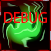
<style>
.page{position:relative;width:51px;height:51px}
.page>*{position:absolute;margin:0}
.t1{font:15px "MyriadPro-Regular";color:#f50909}
</style>
<div class="page">
<p class="t1" style="left:4px;top:12px;width:43px;height:11px">DEBUG</p>
</div>
